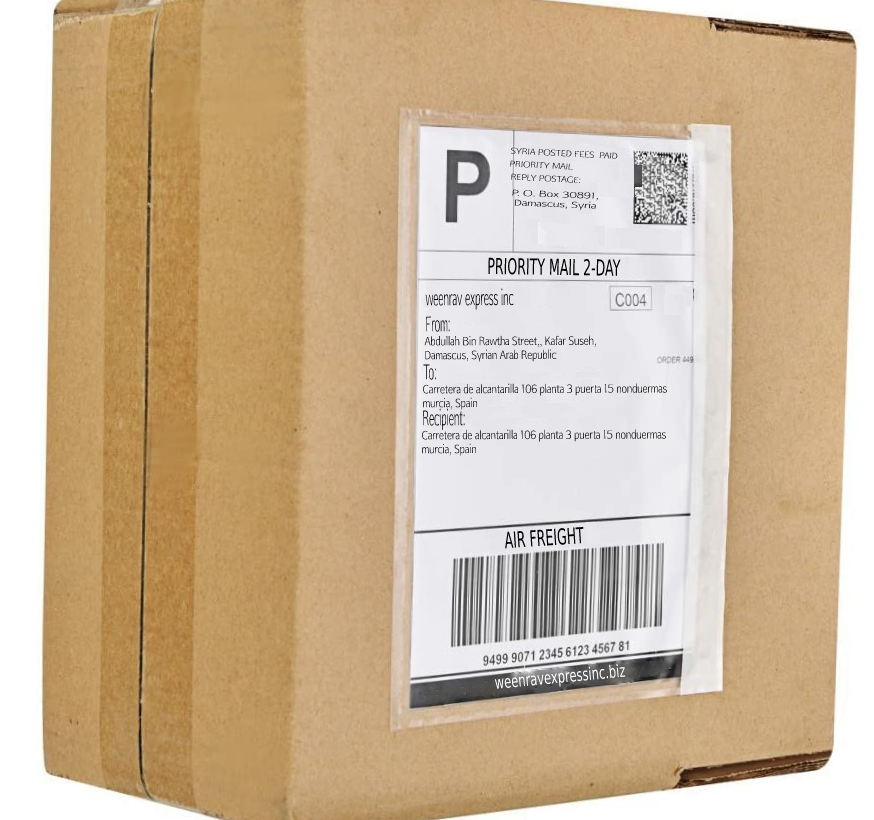
<style>
.page{position:relative;width:874px;height:820px}
.page>*{position:absolute;margin:0}
.t1{font:8.2px "Aftasans";scale:1.07 1}
.t2{font:8.2px "Aftasans";scale:1.4 1}
.t3{font:22.1px "DejaVuSans";color:#000000;scale:0.57 1}
.t4{font:20.6px "Aftasans";color:#000000;scale:0.47 1}
.t5{font:20.6px "Aftasans";scale:0.47 1}
.t6{font:11.6px "Aftasans";color:#0e0e0e;scale:0.81 1}
.t7{font:11.6px "Aftasans";color:#0e0d0e;scale:0.81 1}
.t8{font:17.5px "DejaVuSans";color:#ffffff;scale:0.66 1}
</style>
<div class="page">
<p class="t1" style="left:511px;top:147px;width:107px;height:12px;rotate:3deg">SYRIA POSTED FEES  PAID</p>
<p class="t1" style="left:510px;top:160px;width:63px;height:10px;rotate:3deg">PRIORITY MAIL</p>
<p class="t1" style="left:511px;top:173px;width:70px;height:11px;rotate:3deg">REPLY POSTAGE:</p>
<p class="t2" style="left:512px;top:189px;width:86px;height:21px;rotate:2deg">P. O. Box 30891,<br> Damascus, Syria</p>
<p class="t3" style="left:488px;top:257px;width:133px;height:19px;rotate:1deg">PRIORITY MAIL 2-DAY</p>
<p class="t4" style="left:425px;top:288px;width:89px;height:22px">weenrav express inc</p>
<p class="t5" style="left:426px;top:316px;width:24px;height:16px">From:</p>
<p class="t6" style="left:424px;top:335px;width:172px;height:27px">Abdullah Bin Rawtha Street,, Kafar Suseh,<br>Damascus, Syrian Arab Republic</p>
<p class="t5" style="left:423px;top:364px;width:13px;height:16px">To:</p>
<p class="t6" style="left:422px;top:383px;width:245px;height:27px">Carretera de alcantarilla 106 planta 3 puerta 15 nonduermas<br>murcia, Spain</p>
<p class="t4" style="left:423px;top:408px;width:42px;height:22px">Recipient:</p>
<p class="t7" style="left:421px;top:429px;width:245px;height:27px">Carretera de alcantarilla 106 planta 3 puerta 15 nonduermas<br>murcia, Spain</p>
<p class="t3" style="left:505px;top:526px;width:79px;height:23px;rotate:-4deg">AIR FREIGHT</p>
<p class="t8" style="left:494px;top:663px;width:132px;height:26px;rotate:-5deg">weenravexpressinc.biz</p>
</div>
